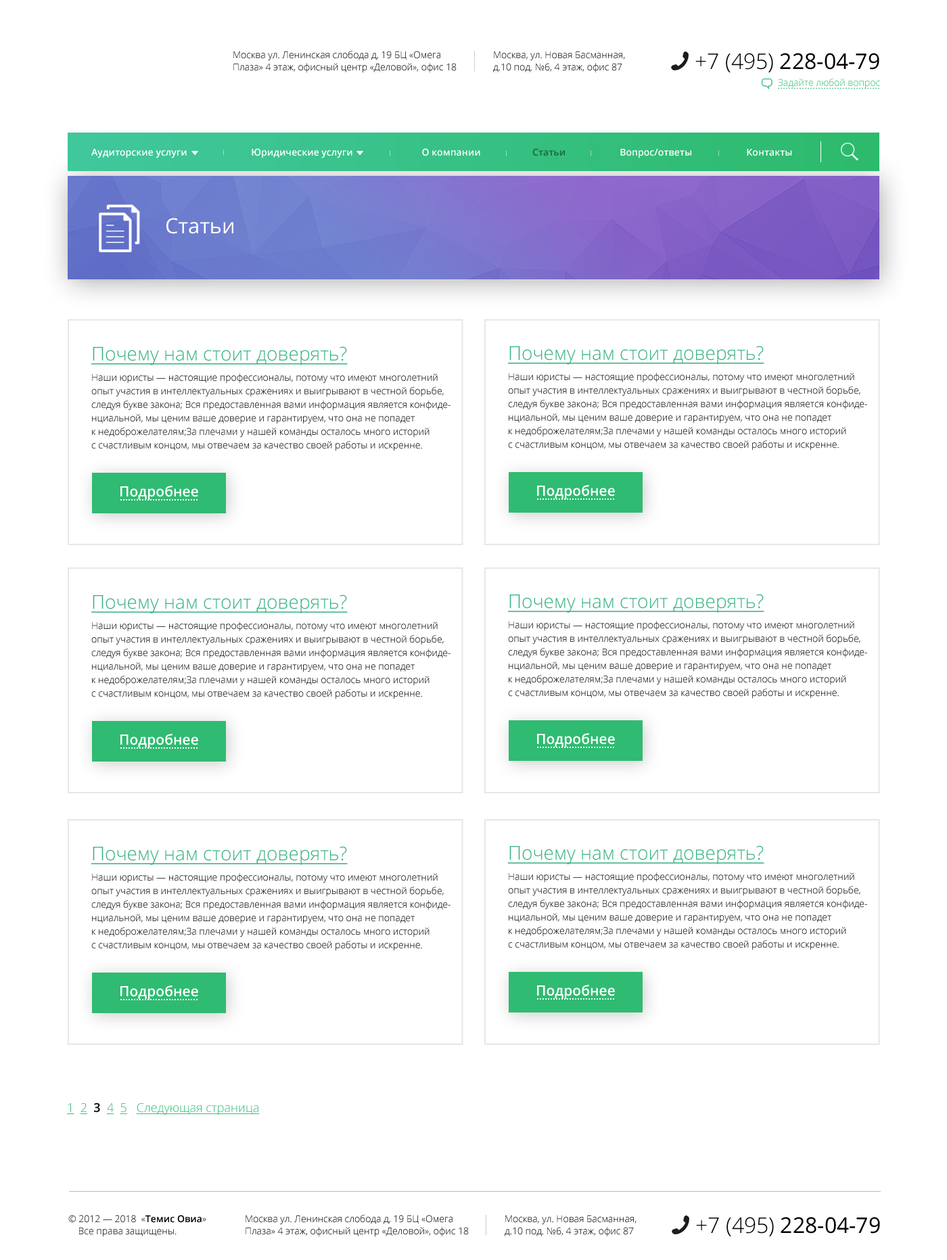
<style>
.page{position:relative;width:947px;height:1260px;background:#ffffff}
.page>*{position:absolute;margin:0}
.t1{font:9.5px/12.2px "OpenSans-Light";color:#000000}
.t2{font:21.6px "OpenSans";color:#000000}
.t3{font:21.6px "OpenSans-Light";color:#000000}
.t4{font:9.5px "OpenSans-Light";color:#31bd76}
.t5{font:9.5px "OpenSans-Semibold";color:#ffffff}
.t6{font:9.5px "OpenSans-Semibold";color:#196734}
.t7{font:21px "OpenSans";color:#ffffff}
.t8{font:18.9px "OpenSans-Light";color:#34b17e;text-decoration:underline}
.t9{font:9.5px/13.5px "OpenSans-Light";color:#000000}
.t10{font:14.2px "OpenSans-Semibold";color:#ffffff}
.t11{font:12.2px "OpenSans-Light";color:#2fba71;text-decoration:underline}
.t12{font:12.2px "OpenSans-Semibold";color:#000101}
.t13{font:9.5px/12.2px "OpenSans-Semibold";color:#000000}
</style>
<div class="page">
<p class="t1" style="left:233px;top:51px;width:223px;height:22px">Москва ул. Ленинская слобода д, 19 БЦ «Омега <br>Плаза» 4 этаж, офисный центр «Деловой», офис 18</p>
<p class="t1" style="left:493px;top:51px;width:132px;height:22px">Москва, ул. Новая Басманная, <br>д.10 под. №6, 4 этаж, офис 87</p>
<p class="t2" style="left:695px;top:53px;width:184px;height:19px"><span class="t3">+7 (495) </span>228-04-79</p>
<p class="t4" style="left:778px;top:78px;width:102px;height:11px">Задайте любой вопрос</p>
<p class="t5" style="left:91px;top:148px;width:701px;height:10px">Аудиторские услуги                          Юридические услуги                            О компании                     <span class="t6">Статьи                      </span>Вопрос/ответы                      Контакты</p>
<p class="t7" style="left:166px;top:218px;width:67px;height:16px">Статьи</p>
<p class="t8" style="left:91px;top:346px;width:257px;height:19px">Почему нам стоит доверять?</p>
<p class="t8" style="left:508px;top:346px;width:256px;height:18px">Почему нам стоит доверять?</p>
<p class="t9" style="left:91px;top:373px;width:359px;height:78px">Наши юристы — настоящие профессионалы, потому что имеют многолетний <br>опыт участия в интеллектуальных сражениях и выигрывают в честной борьбе, <br>следуя букве закона; Вся предоставленная вами информация является конфиде-<br>нциальной, мы ценим ваше доверие и гарантируем, что она не попадет <br>к недоброжелателям;За плечами у нашей команды осталось много историй <br>с счастливым концом, мы отвечаем за качество своей работы и искренне.</p>
<p class="t9" style="left:508px;top:373px;width:359px;height:77px">Наши юристы — настоящие профессионалы, потому что имеют многолетний <br>опыт участия в интеллектуальных сражениях и выигрывают в честной борьбе, <br>следуя букве закона; Вся предоставленная вами информация является конфиде-<br>нциальной, мы ценим ваше доверие и гарантируем, что она не попадет <br>к недоброжелателям;За плечами у нашей команды осталось много историй <br>с счастливым концом, мы отвечаем за качество своей работы и искренне.</p>
<p class="t10" style="left:120px;top:485px;width:78px;height:15px">Подробнее</p>
<p class="t10" style="left:537px;top:485px;width:78px;height:14px">Подробнее</p>
<p class="t8" style="left:508px;top:594px;width:256px;height:19px">Почему нам стоит доверять?</p>
<p class="t8" style="left:91px;top:594px;width:257px;height:19px">Почему нам стоит доверять?</p>
<p class="t9" style="left:91px;top:621px;width:359px;height:78px">Наши юристы — настоящие профессионалы, потому что имеют многолетний <br>опыт участия в интеллектуальных сражениях и выигрывают в честной борьбе, <br>следуя букве закона; Вся предоставленная вами информация является конфиде-<br>нциальной, мы ценим ваше доверие и гарантируем, что она не попадет <br>к недоброжелателям;За плечами у нашей команды осталось много историй <br>с счастливым концом, мы отвечаем за качество своей работы и искренне.</p>
<p class="t9" style="left:508px;top:621px;width:359px;height:77px">Наши юристы — настоящие профессионалы, потому что имеют многолетний <br>опыт участия в интеллектуальных сражениях и выигрывают в честной борьбе, <br>следуя букве закона; Вся предоставленная вами информация является конфиде-<br>нциальной, мы ценим ваше доверие и гарантируем, что она не попадет <br>к недоброжелателям;За плечами у нашей команды осталось много историй <br>с счастливым концом, мы отвечаем за качество своей работы и искренне.</p>
<p class="t10" style="left:120px;top:734px;width:78px;height:14px">Подробнее</p>
<p class="t10" style="left:537px;top:733px;width:78px;height:14px">Подробнее</p>
<p class="t8" style="left:91px;top:846px;width:257px;height:19px">Почему нам стоит доверять?</p>
<p class="t8" style="left:508px;top:845px;width:256px;height:19px">Почему нам стоит доверять?</p>
<p class="t9" style="left:91px;top:873px;width:359px;height:78px">Наши юристы — настоящие профессионалы, потому что имеют многолетний <br>опыт участия в интеллектуальных сражениях и выигрывают в честной борьбе, <br>следуя букве закона; Вся предоставленная вами информация является конфиде-<br>нциальной, мы ценим ваше доверие и гарантируем, что она не попадет <br>к недоброжелателям;За плечами у нашей команды осталось много историй <br>с счастливым концом, мы отвечаем за качество своей работы и искренне.</p>
<p class="t9" style="left:508px;top:872px;width:359px;height:78px">Наши юристы — настоящие профессионалы, потому что имеют многолетний <br>опыт участия в интеллектуальных сражениях и выигрывают в честной борьбе, <br>следуя букве закона; Вся предоставленная вами информация является конфиде-<br>нциальной, мы ценим ваше доверие и гарантируем, что она не попадет <br>к недоброжелателям;За плечами у нашей команды осталось много историй <br>с счастливым концом, мы отвечаем за качество своей работы и искренне.</p>
<p class="t10" style="left:120px;top:985px;width:78px;height:14px">Подробнее</p>
<p class="t10" style="left:537px;top:984px;width:78px;height:15px">Подробнее</p>
<p class="t11" style="left:67px;top:1103px;width:193px;height:12px">1  2  <span class="t12">3  </span>4  5   Следующая страница</p>
<p class="t1" style="left:68px;top:1214px;width:138px;height:23px">© 2012 — 2018  «<span class="t13">Темис Овиа</span>» <br>    Все права защищены.</p>
<p class="t1" style="left:245px;top:1214px;width:224px;height:23px">Москва ул. Ленинская слобода д, 19 БЦ «Омега <br>Плаза» 4 этаж, офисный центр «Деловой», офис 18</p>
<p class="t1" style="left:504px;top:1215px;width:132px;height:22px">Москва, ул. Новая Басманная, <br>д.10 под. №6, 4 этаж, офис 87</p>
<p class="t2" style="left:696px;top:1216px;width:184px;height:20px"><span class="t3">+7 (495) </span>228-04-79</p>
</div>
